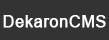
<style>
.page{position:relative;width:109px;height:40px;background:#333333}
.page>*{position:absolute;margin:0}
.t1{font:16px "ArialMT";letter-spacing:0.025em;color:#ffffff;font-weight:bold}
</style>
<div class="page">
<p class="t1" style="left:3px;top:15px;width:103px;height:13px">DekaronCMS</p>
</div>
